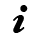
<style>
.page{position:relative;width:40px;height:40px;background:#ffffff}
.page>*{position:absolute;margin:0}
.t1{font:38px "HoeflerText-BlackItalic";color:#000000}
</style>
<div class="page">
<p class="t1" style="left:13px;top:5px;width:15px;height:28px">i</p>
</div>
